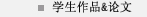
<style>
.page{position:relative;width:147px;height:17px;background:#f1f1f1}
.page>*{position:absolute;margin:0}
.t1{font:12px "SimSun";color:#0d0d0d;font-weight:bold}
</style>
<div class="page">
<p class="t1" style="left:52px;top:1px;width:80px;height:12px">学生作品&amp;论文</p>
</div>
